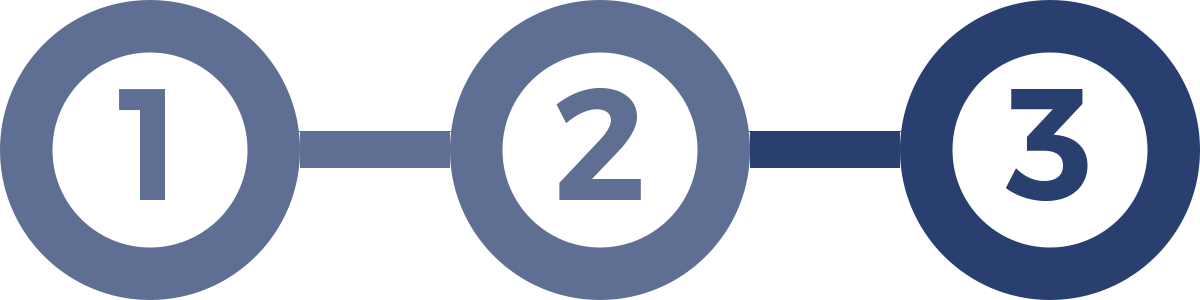
<style>
.page{position:relative;width:1200px;height:300px;background:#ffffff}
.page>*{position:absolute;margin:0}
.t1{font:158.6px "Montserrat-SemiBold";color:#5f6f93}
.t2{font:158.6px "Montserrat-SemiBold";color:#293f6f}
</style>
<div class="page">
<p class="t1" style="left:119px;top:89px;width:46px;height:111px">1</p>
<p class="t1" style="left:556px;top:88px;width:85px;height:112px">2</p>
<p class="t2" style="left:1005px;top:89px;width:83px;height:112px">3</p>
</div>
